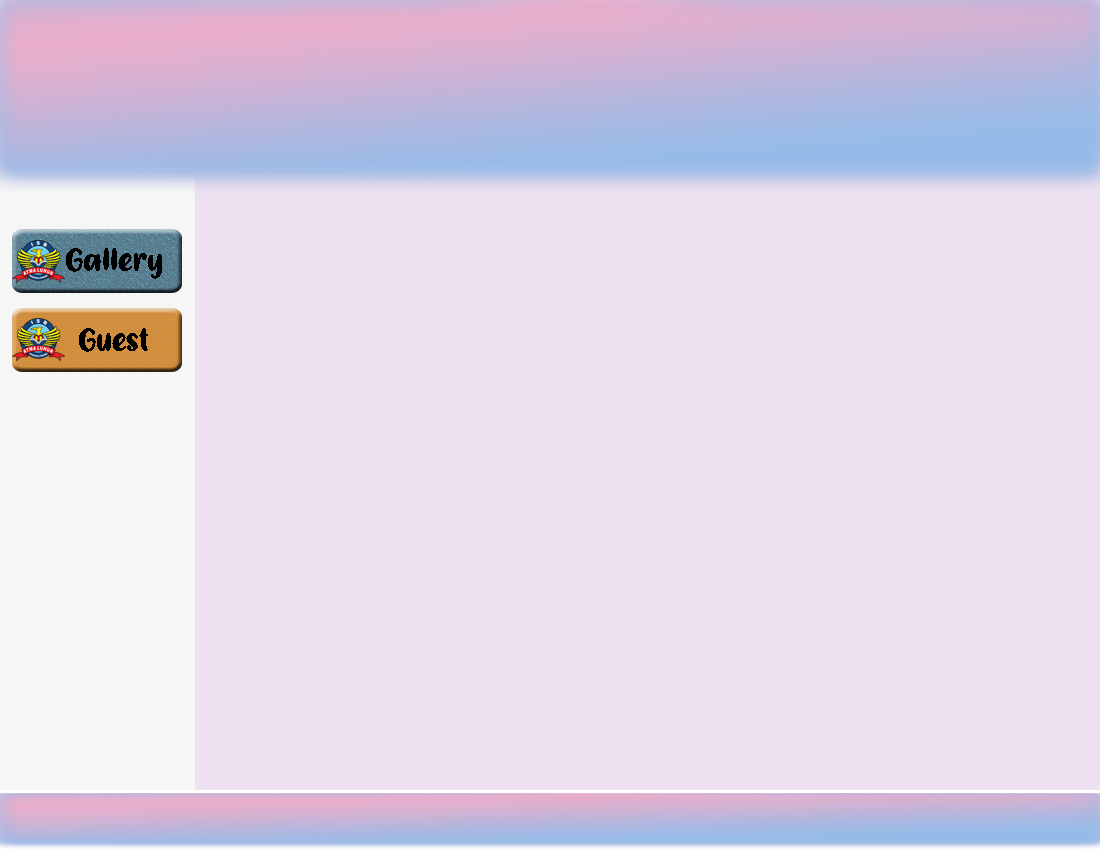
<style>
.page{position:relative;width:1100px;height:850px;background:#ede1f1}
.page>*{position:absolute;margin:0}
.t1{font:33.3px "LobsterBisque";color:#000000}
</style>
<div class="page">
<p class="t1" style="left:66px;top:248px;width:96px;height:31px">Gallery</p>
<p class="t1" style="left:79px;top:328px;width:69px;height:24px">Guest</p>
</div>
